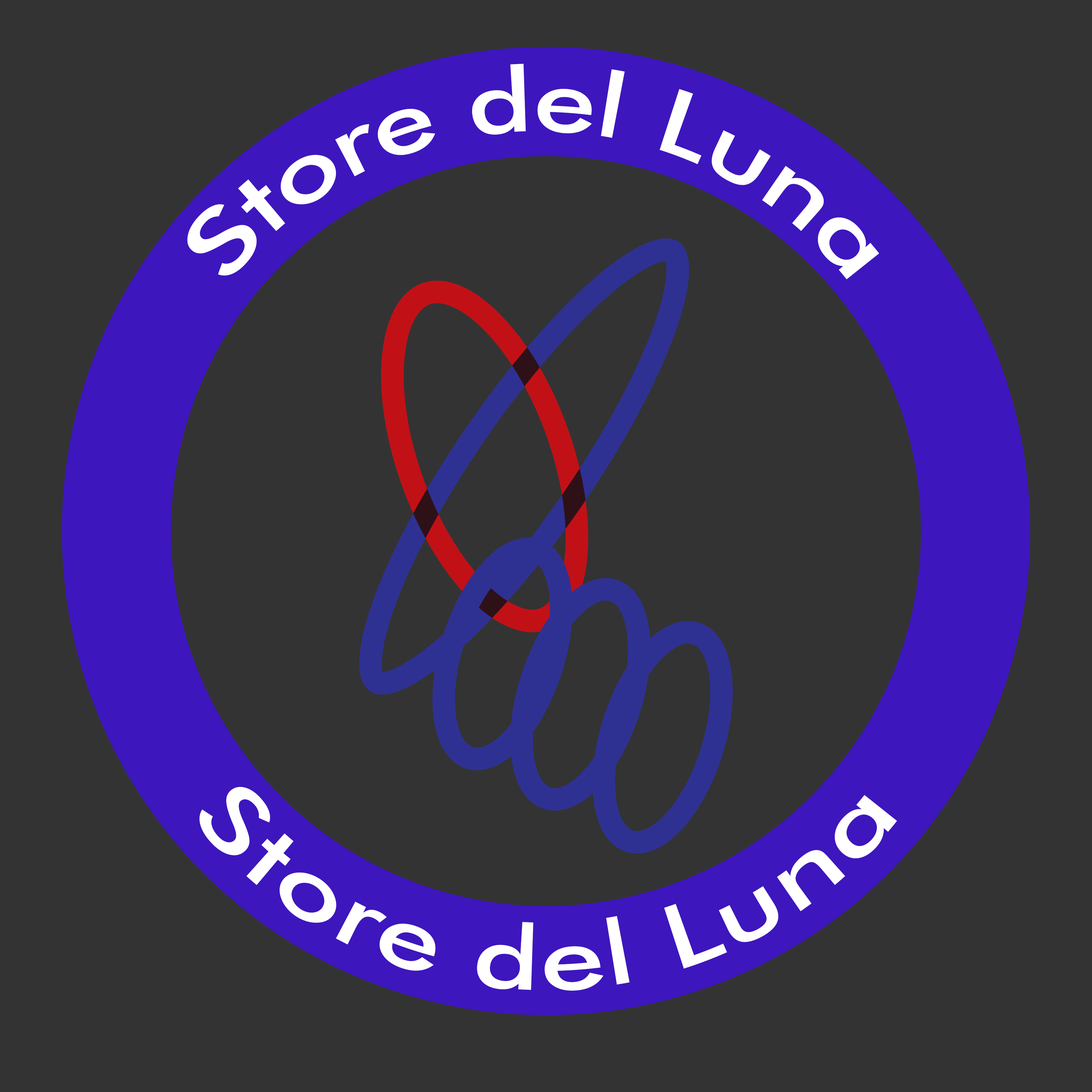
<style>
.page{position:relative;width:1092px;height:1092px;background:#333333}
.page>*{position:absolute;margin:0}
.t1{font:89.3px "FuturaBT-Medium";color:#ffffff}
</style>
<div class="page">
<p class="t1" style="left:187px;top:64px;width:692px;height:216px;text-align:center">Store del Luna</p>
<p class="t1" style="left:199px;top:787px;width:698px;height:204px;text-align:center">Store del Luna</p>
</div>
